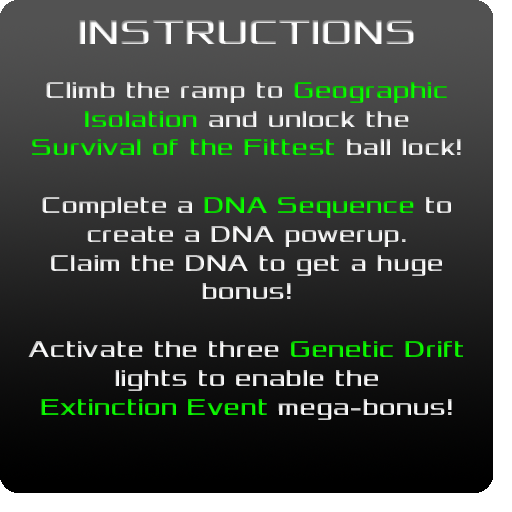
<style>
.page{position:relative;width:512px;height:512px}
.page>*{position:absolute;margin:0}
.t1{font:36px "Xolonium"}
.t2{font:24px "Xolonium"}
</style>
<div class="page">
<p class="t1" style="left:79px;top:20px;width:335px;height:24px">INSTRUCTIONS</p>
<p class="t2" style="left:28px;top:82px;width:435px;height:338px;text-align:center">Climb the ramp to Geographic Isolation and unlock the <br>Survival of the Fittest ball lock!<br><br>Complete a DNA Sequence to create a DNA powerup. <br>Claim the DNA to get a huge bonus!<br><br>Activate the three Genetic Drift lights to enable the <br>Extinction Event mega-bonus!</p>
</div>
